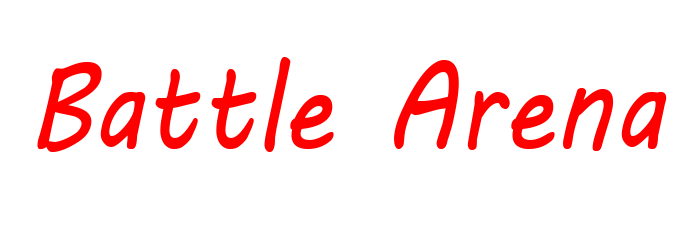
<style>
.page{position:relative;width:700px;height:250px;background:#ffffff}
.page>*{position:absolute;margin:0}
.t1{font:125px "MVBoli";color:#ff0000;scale:0.84 1}
</style>
<div class="page">
<p class="t1" style="left:37px;top:57px;width:630px;height:95px">Battle Arena</p>
</div>
